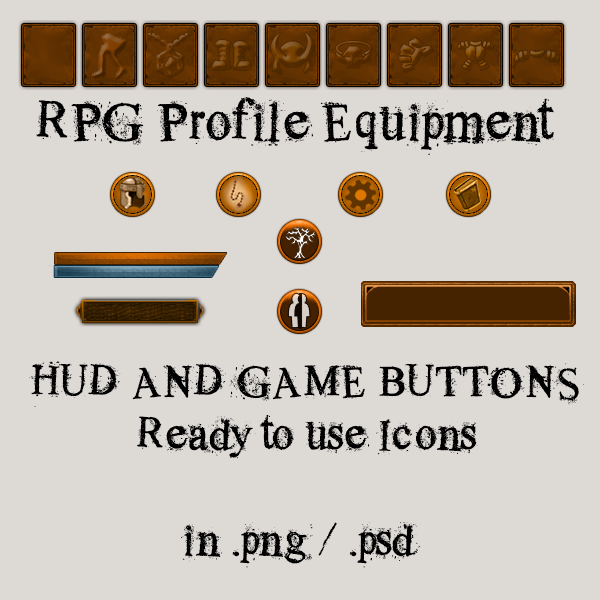
<style>
.page{position:relative;width:600px;height:600px;background:#ddd9d5}
.page>*{position:absolute;margin:0}
.t1{font:53px "OldDreams";color:#000000}
.t2{font:44px "OldDreams";color:#000000}
</style>
<div class="page">
<p class="t1" style="left:36px;top:97px;width:518px;height:58px">RPG Profile Equipment</p>
<p class="t2" style="left:29px;top:361px;width:555px;height:207px">HUD AND GAME BUTTONS<br>   Ready to use Icons<br><br>              in .png / .psd</p>
</div>
